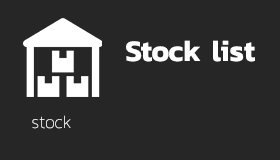
<style>
.page{position:relative;width:280px;height:160px;background:#262626}
.page>*{position:absolute;margin:0}
.t1{font:30px "Kanit-SemiBold";color:#ffffff}
.t2{font:18px "Kanit-Thin";color:#ffffff}
</style>
<div class="page">
<p class="t1" style="left:126px;top:40px;width:129px;height:22px">Stock list</p>
<p class="t2" style="left:32px;top:115px;width:39px;height:14px">stock</p>
</div>
